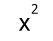
<style>
.page{position:relative;width:53px;height:41px;background:#ffffff}
.page>*{position:absolute;margin:0}
.t1{font:13.4px "DroidSans";color:#000000}
.t2{font:23.7px "DroidSans";color:#000000}
</style>
<div class="page">
<p class="t1" style="left:31px;top:4px;width:7px;height:10px">2</p>
<p class="t2" style="left:19px;top:18px;width:11px;height:13px">x</p>
</div>
